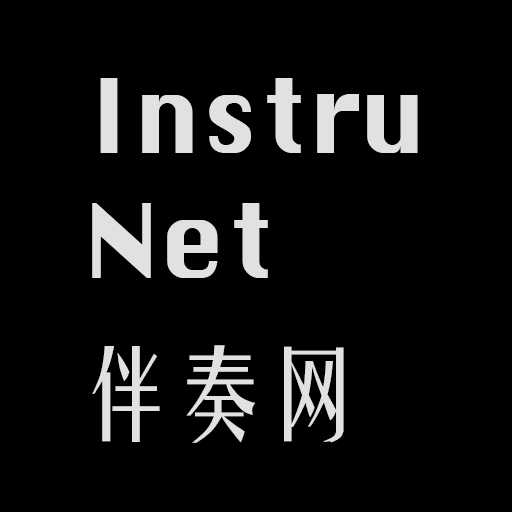
<style>
.page{position:relative;width:512px;height:512px;background:#000000}
.page>*{position:absolute;margin:0}
.t1{font:100px/125px "Silom";color:#e1e1e1}
.t2{font:100px "GEETYPE-YaoTiGBT-Flash";letter-spacing:-0.05em;color:#e1e1e1}
</style>
<div class="page">
<p class="t1" style="left:92px;top:78px;width:326px;height:200px">Instru<br>Net</p>
<p class="t2" style="left:92px;top:345px;width:252px;height:98px">伴奏网</p>
</div>
